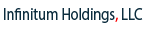
<style>
.page{position:relative;width:150px;height:30px;background:#ffffff}
.page>*{position:absolute;margin:0}
.t1{font:16.8px "MyriadPro-Regular";letter-spacing:-0.01em;color:#0d2d3e;scale:0.88 1}
.t2{font:16.8px "MyriadPro-Regular";letter-spacing:-0.01em;color:#fc0000;scale:0.88 1}
</style>
<div class="page">
<p class="t1" style="left:4px;top:8px;width:139px;height:15px">Infinitum Holdings  LLC</p>
<p class="t2" style="left:115px;top:17px;width:3px;height:5px">,</p>
</div>
